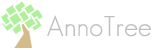
<style>
.page{position:relative;width:153px;height:50px;background:#ffffff}
.page>*{position:absolute;margin:0}
.t1{font:28px "GeosansLight";color:#bfbfbf}
</style>
<div class="page">
<p class="t1" style="left:47px;top:15px;width:104px;height:22px">AnnoTree</p>
</div>
